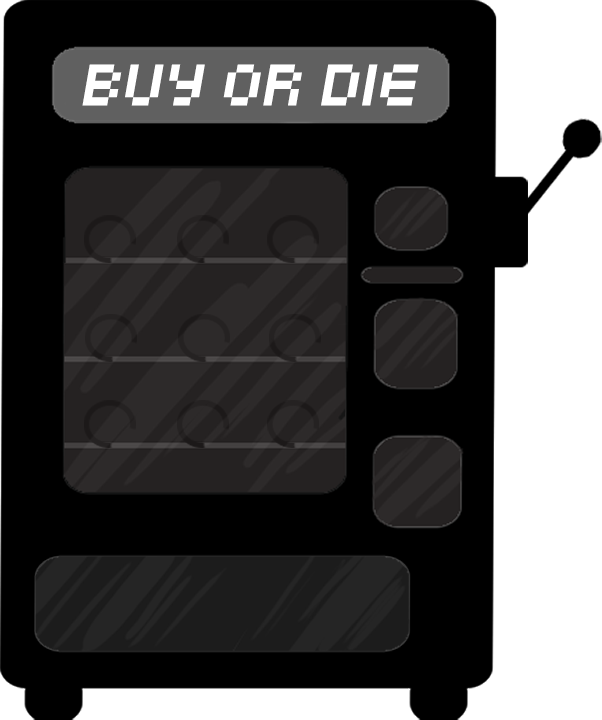
<style>
.page{position:relative;width:602px;height:720px;background:#000000}
.page>*{position:absolute;margin:0}
.t1{font:65.8px "Kenney-Mini";color:#ffffff;font-style:italic}
</style>
<div class="page">
<p class="t1" style="left:82px;top:64px;width:337px;height:42px">BUY OR DIE</p>
</div>
